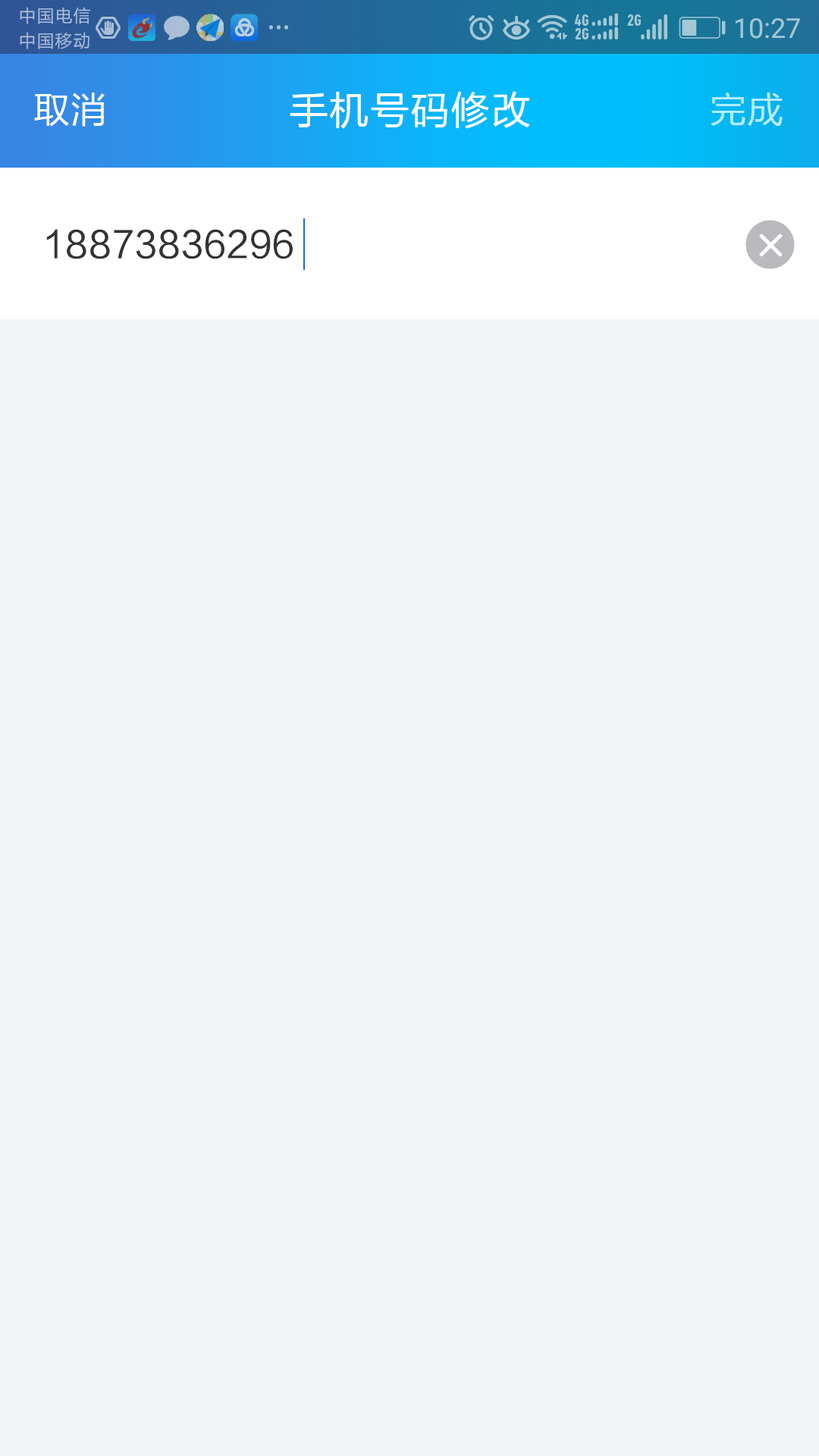
<style>
.page{position:relative;width:819px;height:1456px;background:#f2f4f8}
.page>*{position:absolute;margin:0}
.t1{font:36.4px "FZLTHK--GBK1-0";letter-spacing:0.025em;color:#ffffff}
.t2{font:39.4px "FZLTHK--GBK1-0";letter-spacing:0.025em;color:#ffffff}
.t3{font:36.4px "FZLTHK--GBK1-0";letter-spacing:0.025em;color:#b2ebff}
.t4{font:36.4px "FZLTHK--GBK1-0";letter-spacing:0.025em;color:#333333}
</style>
<div class="page">
<p class="t1" style="left:34px;top:93px;width:71px;height:34px">取消</p>
<p class="t2" style="left:290px;top:91px;width:240px;height:38px">手机号码修改</p>
<p class="t3" style="left:711px;top:92px;width:72px;height:35px">完成</p>
<p class="t4" style="left:46px;top:229px;width:247px;height:30px">18873836296</p>
</div>
